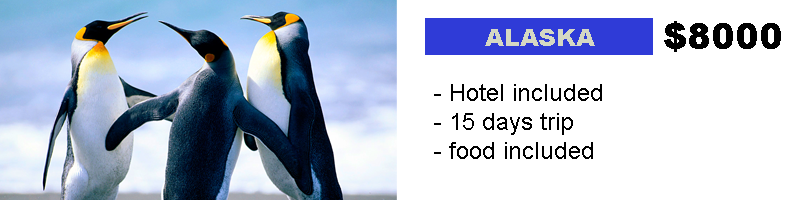
<style>
.page{position:relative;width:800px;height:200px;background:#ffffff}
.page>*{position:absolute;margin:0}
.t1{font:24px "Arial-Black";color:#d5d8c3}
.t2{font:36px "Arial-Black";color:#000000}
.t3{font:24px "ArialMT";color:#000000}
</style>
<div class="page">
<p class="t1" style="left:485px;top:29px;width:110px;height:17px">ALASKA</p>
<p class="t2" style="left:664px;top:21px;width:117px;height:31px">$8000</p>
<p class="t3" style="left:434px;top:84px;width:168px;height:75px">- Hotel included<br> - 15 days trip<br> - food included</p>
</div>
